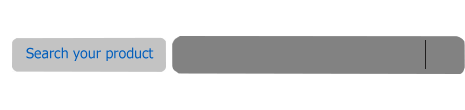
<style>
.page{position:relative;width:465px;height:110px;background:#ffffff}
.page>*{position:absolute;margin:0}
.t1{font:14.2px "Tahoma";color:#065eb7}
</style>
<div class="page">
<p class="t1" style="left:26px;top:47px;width:128px;height:14px">Search your product</p>
</div>
